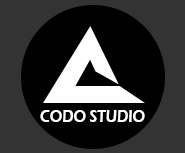
<style>
.page{position:relative;width:185px;height:153px;background:#000000}
.page>*{position:absolute;margin:0}
.t1{font:17.5px "ErasITC-Demi";letter-spacing:-0.02em;color:#fffefe;scale:0.88 1}
</style>
<div class="page">
<p class="t1" style="left:40px;top:110px;width:105px;height:12px">CODO STUDIO</p>
</div>
